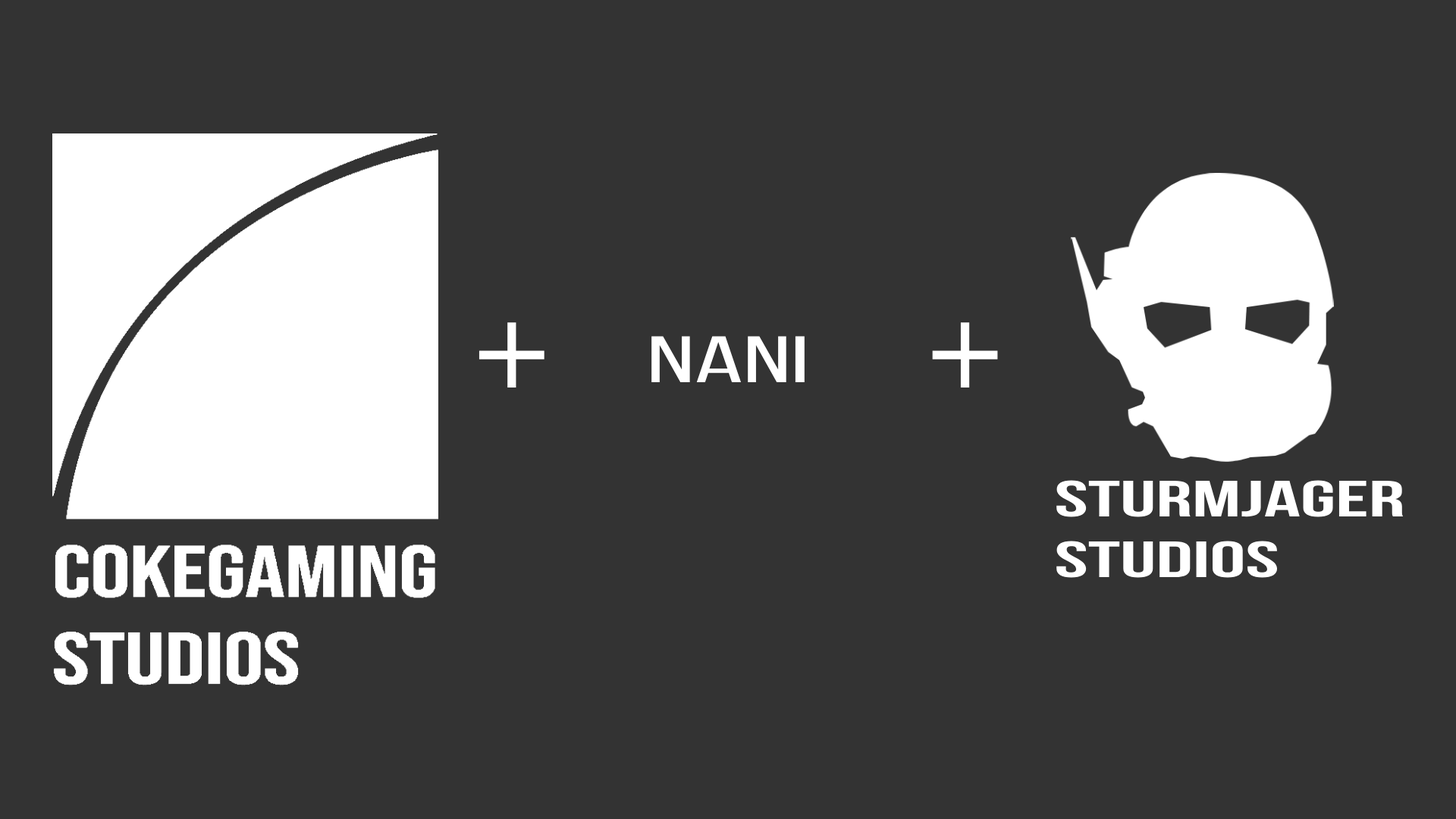
<style>
.page{position:relative;width:1456px;height:819px;background:#333333}
.page>*{position:absolute;margin:0}
.t1{font:103.9px "DejaVuSans";color:#ffffff}
.t2{font:65.6px "BebasNeueRegular";color:#ffffff;scale:1.77 1}
.t3{font:50.9px "BebasNeueBold";color:#ffffff;scale:1.77 1}
</style>
<div class="page">
<p class="t1" style="left:479px;top:322px;width:65px;height:66px">+</p>
<p class="t1" style="left:932px;top:322px;width:66px;height:66px">+</p>
<p class="t2" style="left:651px;top:336px;width:154px;height:46px">NANI</p>
<p class="t3" style="left:1056px;top:480px;width:347px;height:98px">Sturmjager<br>Studios</p>
</div>
